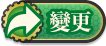
<style>
.page{position:relative;width:106px;height:46px}
.page>*{position:absolute;margin:0}
.t1{font:22px "RyuminPr6N-ExBold";letter-spacing:-0.075em;color:#fff8e7}
</style>
<div class="page">
<p class="t1" style="left:50px;top:11px;width:41px;height:21px">變更</p>
</div>
